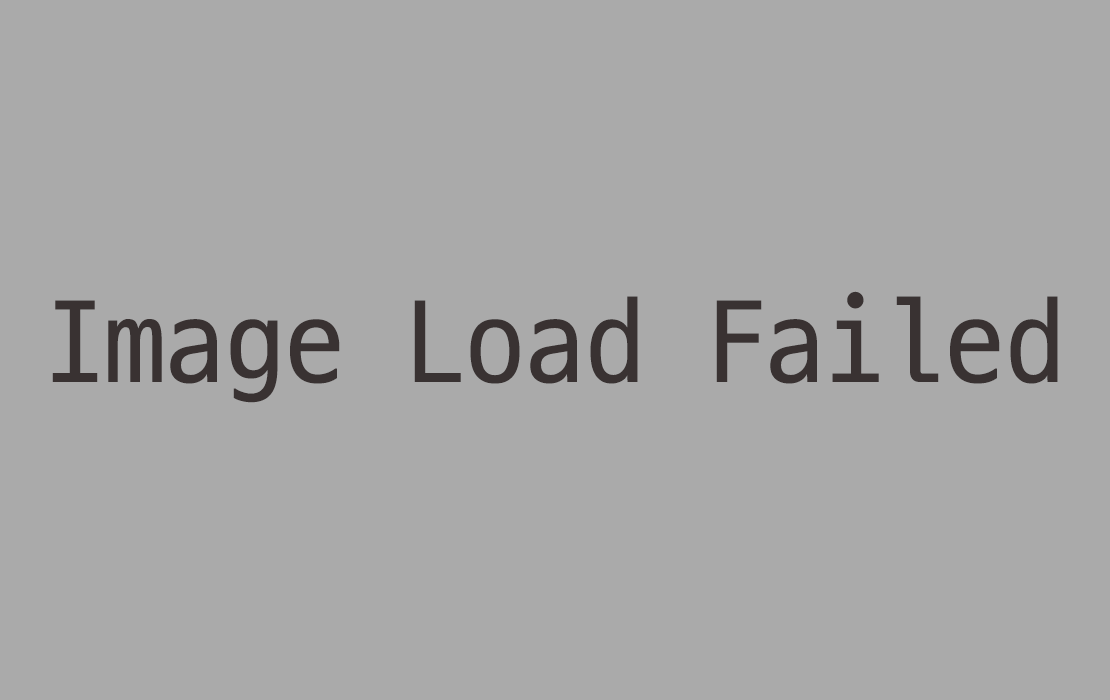
<style>
.page{position:relative;width:1110px;height:700px;background:#aaaaaa}
.page>*{position:absolute;margin:0}
.t1{font:120px "D2Coding";color:#393232}
</style>
<div class="page">
<p class="t1" style="left:52px;top:291px;width:1006px;height:112px">Image Load Failed</p>
</div>
